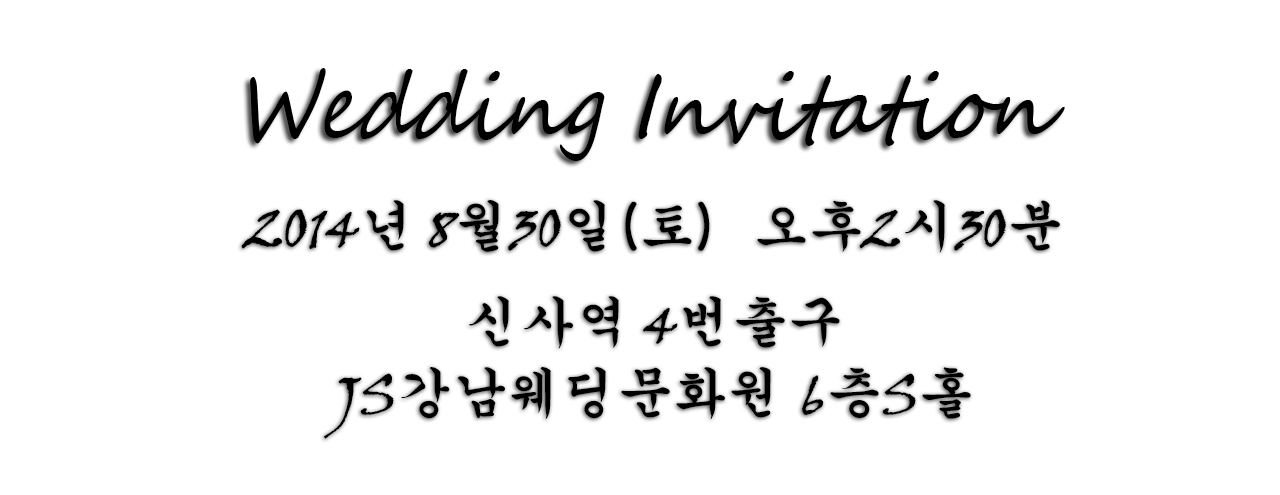
<style>
.page{position:relative;width:1280px;height:495px;background:#ffffff}
.page>*{position:absolute;margin:0}
.t1{font:89.7px "SegoeScript";color:#000000;font-style:italic;scale:0.87 1}
.t2{font:55px "H2gsrB";color:#000000}
.t3{font:55px "VinerHandITC";color:#000000}
.t4{font:55px/71px "H2gsrB";color:#000000}
.t5{font:55px/71px "VinerHandITC";color:#000000}
</style>
<div class="page">
<p class="t1" style="left:250px;top:68px;width:815px;height:93px">Wedding Invitation</p>
<p class="t2" style="left:241px;top:200px;width:819px;height:239px;text-align:center"><span class="t3">2014</span>년<span class="t3"> 8</span>월<span class="t3">30</span>일(토)  오후<span class="t3">2</span>시<span class="t3">30</span>분<br><span class="t4">신사역</span><span class="t5"> 4</span><span class="t4">번출구<br></span><span class="t5">JS</span><span class="t4">강남웨딩문화원 </span><span class="t5">6</span><span class="t4">층</span><span class="t5">S</span><span class="t4">홀</span></p>
</div>
